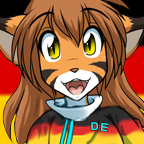
<style>
.page{position:relative;width:144px;height:144px}
.page>*{position:absolute;margin:0}
.t1{font:11px "Arial-BoldMT";letter-spacing:0.01em;color:#05fafc}
</style>
<div class="page">
<p class="t1" style="left:91px;top:122px;width:18px;height:10px;rotate:9deg">DE</p>
</div>
